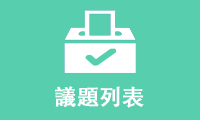
<style>
.page{position:relative;width:200px;height:120px;background:#57ceae}
.page>*{position:absolute;margin:0}
.t1{font:22px "AdobeHeitiStd-Regular";color:#ffffff;font-weight:bold}
</style>
<div class="page">
<p class="t1" style="left:55px;top:86px;width:89px;height:22px">議題列表</p>
</div>
